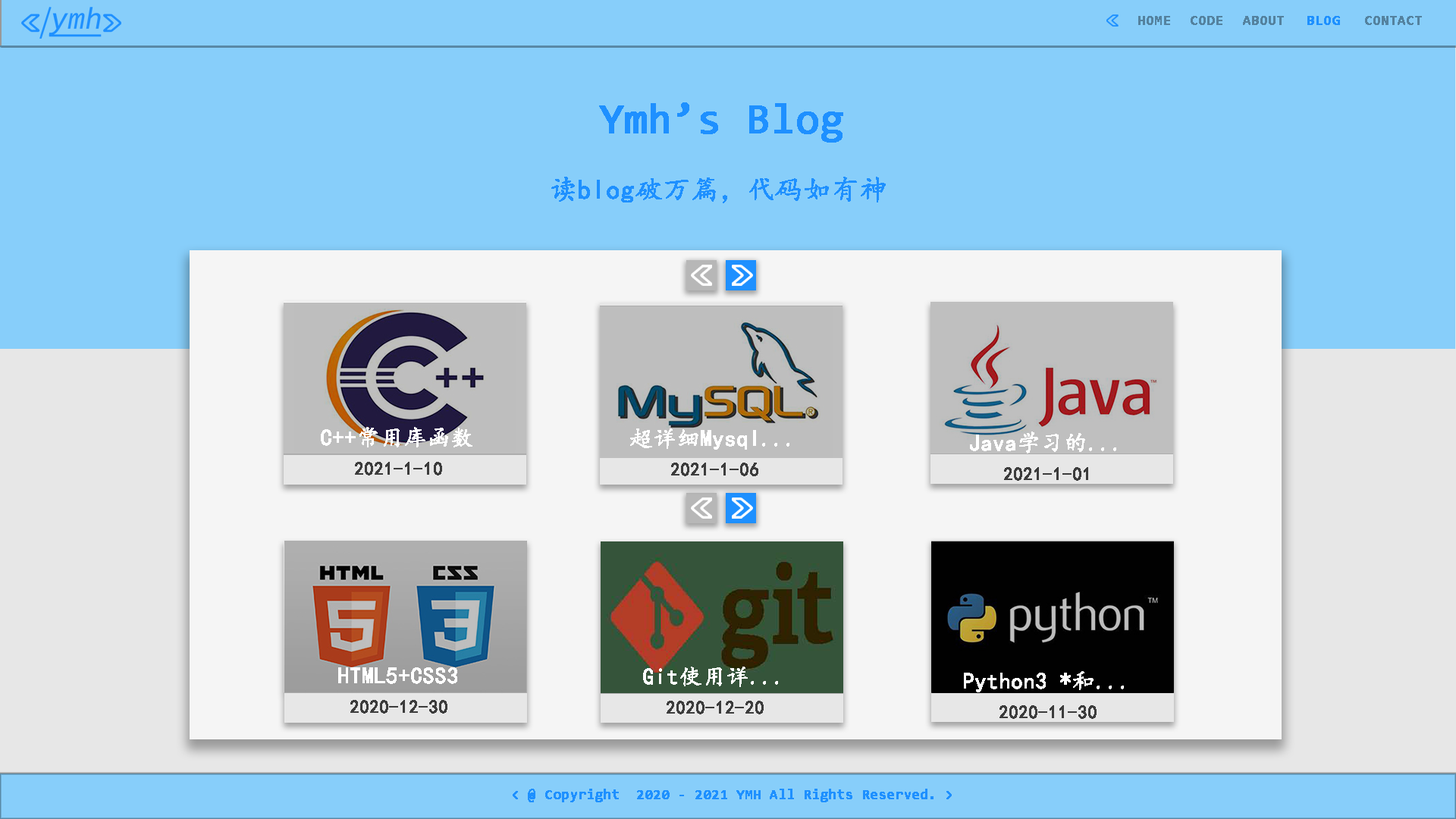
<style>
.page{position:relative;width:1456px;height:819px;background:#87cefa}
.page>*{position:absolute;margin:0}
.t1{font:13.6px "Consolas";color:#54829f;font-weight:bold}
.t2{font:13.6px "Consolas";color:#1e90ff;font-weight:bold}
.t3{font:42.5px "Consolas";color:#1e90ff;font-weight:bold}
.t4{font:27.3px "KaiTi";color:#1e90ff;font-weight:bold}
.t5{font:22.7px "KaiTi";color:#ffffff;font-weight:bold}
.t6{font:18.2px "KaiTi";color:#3c3c3c;font-weight:bold}
</style>
<div class="page">
<p class="t1" style="left:1138px;top:16px;width:32px;height:9px">HOME</p>
<p class="t1" style="left:1191px;top:16px;width:31px;height:9px">CODE</p>
<p class="t1" style="left:1243px;top:16px;width:41px;height:9px">ABOUT</p>
<p class="t2" style="left:1307px;top:16px;width:33px;height:9px">BLOG</p>
<p class="t1" style="left:1365px;top:16px;width:57px;height:9px">CONTACT</p>
<p class="t3" style="left:599px;top:102px;width:244px;height:41px">Ymh’s Blog</p>
<p class="t4" style="left:551px;top:177px;width:335px;height:26px">读blog破万篇，代码如有神</p>
<p class="t5" style="left:321px;top:427px;width:151px;height:20px">C++常用库函数</p>
<p class="t5" style="left:630px;top:428px;width:159px;height:22px">超详细Mysql...</p>
<p class="t5" style="left:970px;top:431px;width:146px;height:22px">Java学习的...</p>
<p class="t6" style="left:355px;top:462px;width:87px;height:13px">2021-1-10</p>
<p class="t6" style="left:671px;top:463px;width:87px;height:13px">2021-1-06</p>
<p class="t6" style="left:1004px;top:467px;width:84px;height:14px">2021-1-01</p>
<p class="t5" style="left:338px;top:667px;width:119px;height:17px">HTML5+CSS3</p>
<p class="t5" style="left:643px;top:667px;width:135px;height:20px">Git使用详...</p>
<p class="t5" style="left:964px;top:671px;width:160px;height:21px">Python3 *和...</p>
<p class="t6" style="left:350px;top:700px;width:97px;height:14px">2020-12-30</p>
<p class="t6" style="left:667px;top:701px;width:97px;height:13px">2020-12-20</p>
<p class="t6" style="left:999px;top:705px;width:98px;height:14px">2020-11-30</p>
<p class="t2" style="left:513px;top:789px;width:439px;height:13px">&lt; @ Copyright  2020 - 2021 YMH All Rights Reserved. &gt;</p>
</div>
